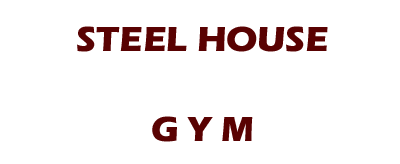
<style>
.page{position:relative;width:400px;height:164px;background:#ffffff}
.page>*{position:absolute;margin:0}
.t1{font:36px/18px "ErasITC-Bold";color:#590202}
</style>
<div class="page">
<p class="t1" style="left:77px;top:26px;width:251px;height:116px;text-align:center">STEEL HOUSE<br><br><br><br><br>G Y M</p>
</div>
